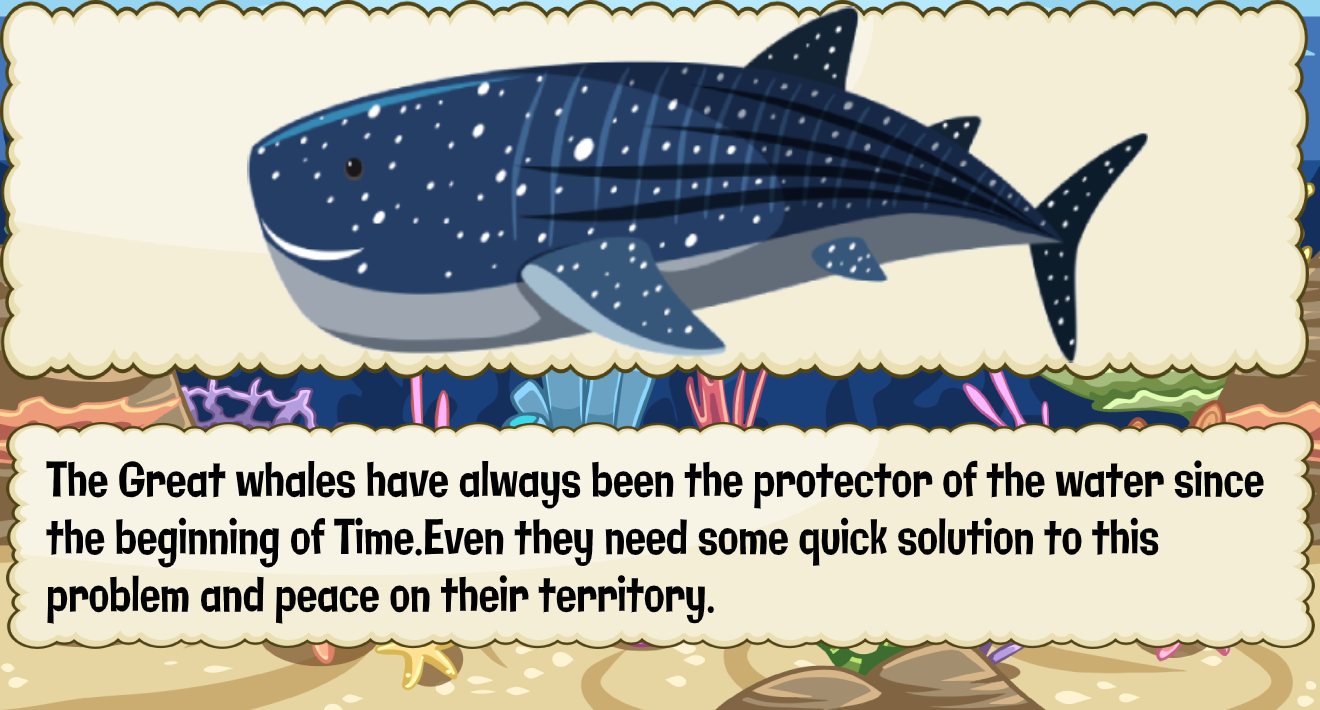
<style>
.page{position:relative;width:1320px;height:710px;background:#f4eed7}
.page>*{position:absolute;margin:0}
.t1{font:47.9px "Galindo-Regular";color:#000000;scale:0.71 1}
</style>
<div class="page">
<p class="t1" style="left:46px;top:460px;width:1218px;height:164px">The Great whales have always been the protector of the water since <br>the beginning of Time.Even they need some quick solution to this <br>problem and peace on their territory.</p>
</div>
